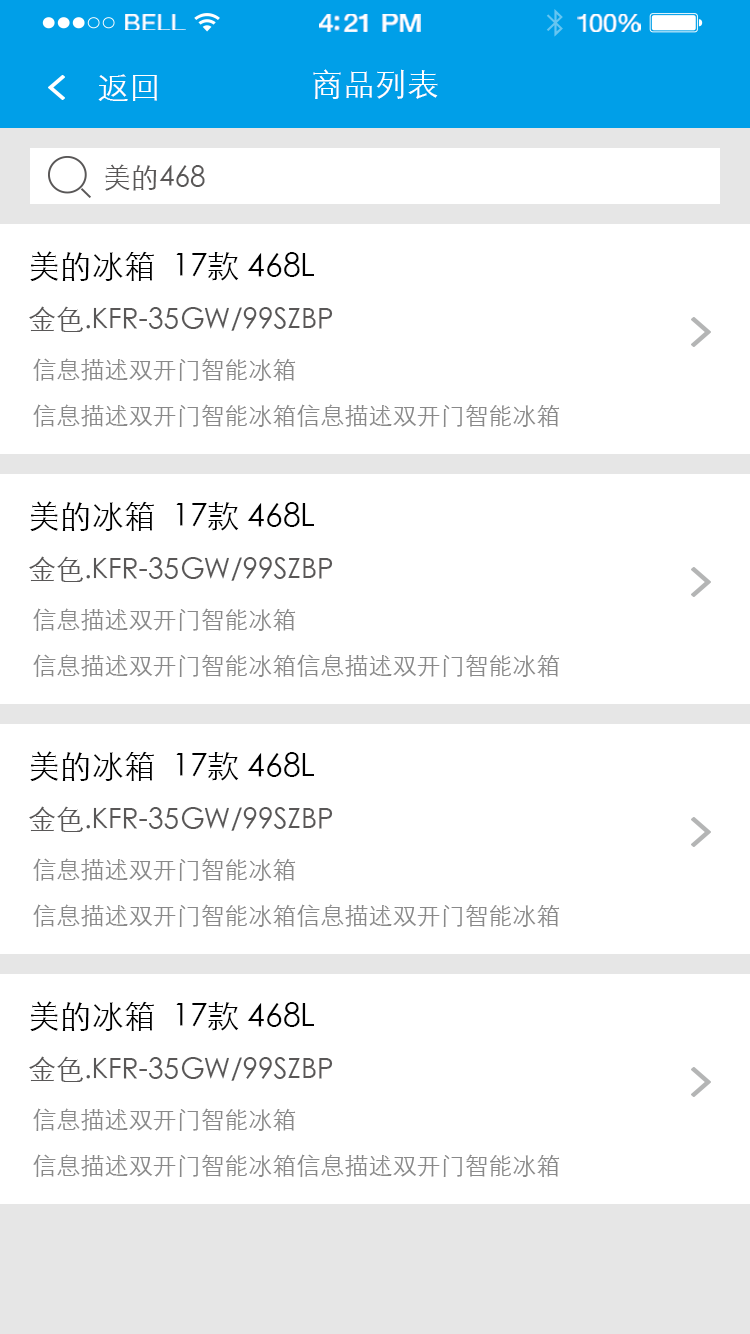
<style>
.page{position:relative;width:750px;height:1334px;background:#ffffff}
.page>*{position:absolute;margin:0}
.t1{font:23.3px "HelveticaNeue";letter-spacing:0.02em;color:#ffffff;scale:1.06 1}
.t2{font:25.3px "HelveticaNeue-Medium";letter-spacing:-0.02em;color:#ffffff;scale:1.06 1}
.t3{font:24.3px "HelveticaNeue";letter-spacing:-0.02em;color:#ffffff;scale:1.06 1}
.t4{font:32px "STXihei";color:#ffffff}
.t5{font:28px "STXihei";color:#595757}
.t6{font:28px/56px "STXihei";color:#595757}
.t7{font:32px/56px "STXihei";color:#000000}
.t8{font:24px/46px "STXihei";color:#898989}
</style>
<div class="page">
<p class="t1" style="left:125px;top:14px;width:61px;height:16px">BELL</p>
<p class="t2" style="left:319px;top:14px;width:102px;height:18px">4:21 PM</p>
<p class="t3" style="left:577px;top:14px;width:64px;height:18px">100%</p>
<p class="t4" style="left:98px;top:74px;width:59px;height:27px">返回</p>
<p class="t4" style="left:313px;top:69px;width:125px;height:30px">商品列表</p>
<p class="t5" style="left:105px;top:164px;width:100px;height:27px">美的468</p>
<p class="t6" style="left:29px;top:251px;width:304px;height:81px"><span class="t7">美的冰箱  17款 468L<br></span>金色.KFR-35GW/99SZBP</p>
<p class="t8" style="left:33px;top:358px;width:527px;height:69px">信息描述双开门智能冰箱<br>信息描述双开门智能冰箱信息描述双开门智能冰箱</p>
<p class="t6" style="left:29px;top:501px;width:304px;height:81px"><span class="t7">美的冰箱  17款 468L<br></span>金色.KFR-35GW/99SZBP</p>
<p class="t8" style="left:33px;top:608px;width:527px;height:69px">信息描述双开门智能冰箱<br>信息描述双开门智能冰箱信息描述双开门智能冰箱</p>
<p class="t6" style="left:29px;top:751px;width:304px;height:81px"><span class="t7">美的冰箱  17款 468L<br></span>金色.KFR-35GW/99SZBP</p>
<p class="t8" style="left:33px;top:858px;width:527px;height:69px">信息描述双开门智能冰箱<br>信息描述双开门智能冰箱信息描述双开门智能冰箱</p>
<p class="t6" style="left:29px;top:1001px;width:304px;height:81px"><span class="t7">美的冰箱  17款 468L<br></span>金色.KFR-35GW/99SZBP</p>
<p class="t8" style="left:33px;top:1108px;width:527px;height:69px">信息描述双开门智能冰箱<br>信息描述双开门智能冰箱信息描述双开门智能冰箱</p>
</div>
